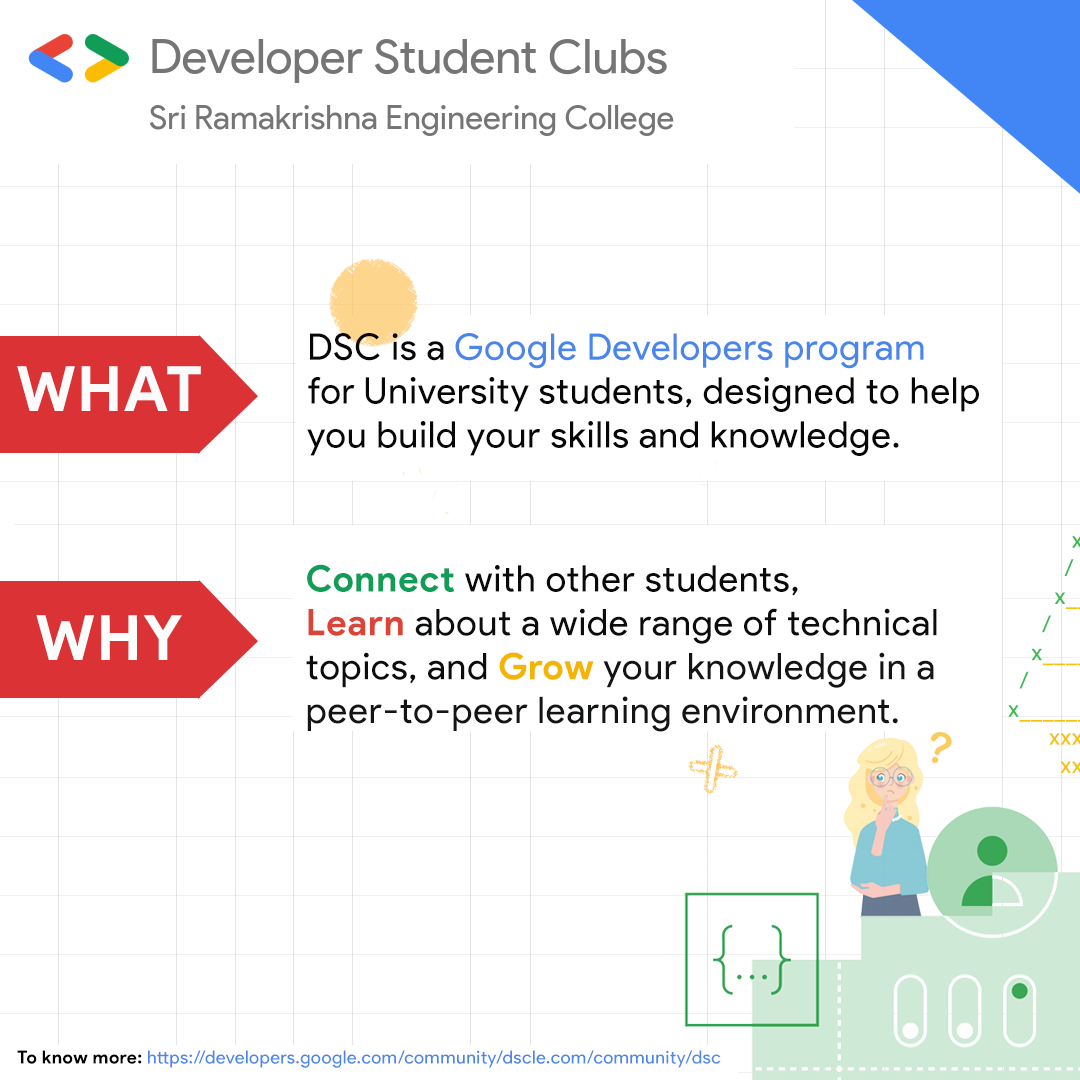
<style>
.page{position:relative;width:1080px;height:1080px;background:#ffffff}
.page>*{position:absolute;margin:0}
.t1{font:36.6px "ProductSans-Regular";letter-spacing:0.025em;color:#070707}
.t2{font:36.6px "ProductSans-Regular";letter-spacing:0.025em;color:#4885ed}
.t3{font:62.5px "ProductSans-Bold";letter-spacing:0.025em;color:#fcfbfb}
.t4{font:36.6px "ProductSans-Regular";letter-spacing:0.025em;color:#131414}
.t5{font:36.6px "ProductSans-Bold";letter-spacing:0.025em;color:#0f9d58}
.t6{font:36.6px "ProductSans-Regular";letter-spacing:0.025em;color:#0a0a0a}
.t7{font:36.6px "ProductSans-Bold";letter-spacing:0.025em;color:#db4437}
.t8{font:36.6px "ProductSans-Regular";letter-spacing:0.025em;color:#0b0c0c}
.t9{font:36.6px "ProductSans-Bold";letter-spacing:0.025em;color:#f4b400}
.t10{font:62.5px "ProductSans-Bold";letter-spacing:0.025em;color:#fbfefc}
.t11{font:18px "ProductSans-Regular";letter-spacing:0.025em;color:#4885ed}
.t12{font:18px "ProductSans-Bold";letter-spacing:0.025em;color:#000000}
</style>
<div class="page">
<p class="t1" style="left:307px;top:333px;width:672px;height:123px;text-align:right">DSC is a <span class="t2">Google Developers program</span> <br>for University students, designed to help <br>you build your skills and knowledge.</p>
<p class="t3" style="left:17px;top:366px;width:184px;height:45px">WHAT</p>
<p class="t4" style="left:306px;top:564px;width:631px;height:168px;text-align:right"><span class="t5">Connect </span><span class="t6">with other students, <br></span><span class="t7">Learn </span><span class="t8">about a wide range of technical <br>topics, and </span><span class="t9">Grow </span>your knowledge in a <br>peer-to-peer learning environment.</p>
<p class="t10" style="left:36px;top:615px;width:146px;height:45px">WHY</p>
<p class="t11" style="left:17px;top:1050px;width:704px;height:18px"><span class="t12">To know more: </span>https://developers.google.com/community/dscle.com/community/dsc</p>
</div>
